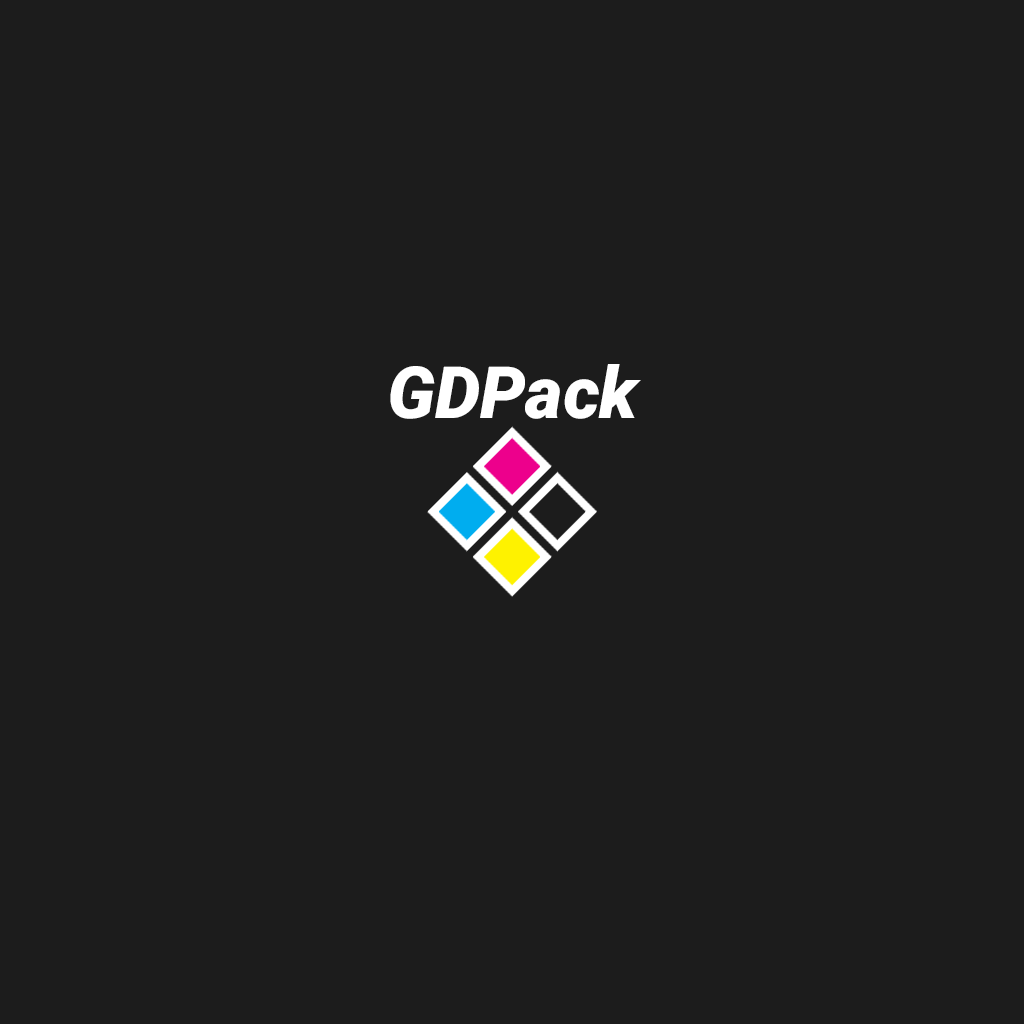
<style>
.page{position:relative;width:1024px;height:1024px;background:#1c1c1c}
.page>*{position:absolute;margin:0}
.t1{font:72px "Roboto-BlackItalic";color:#ffffff}
</style>
<div class="page">
<p class="t1" style="left:390px;top:364px;width:251px;height:55px">GDPack</p>
</div>
